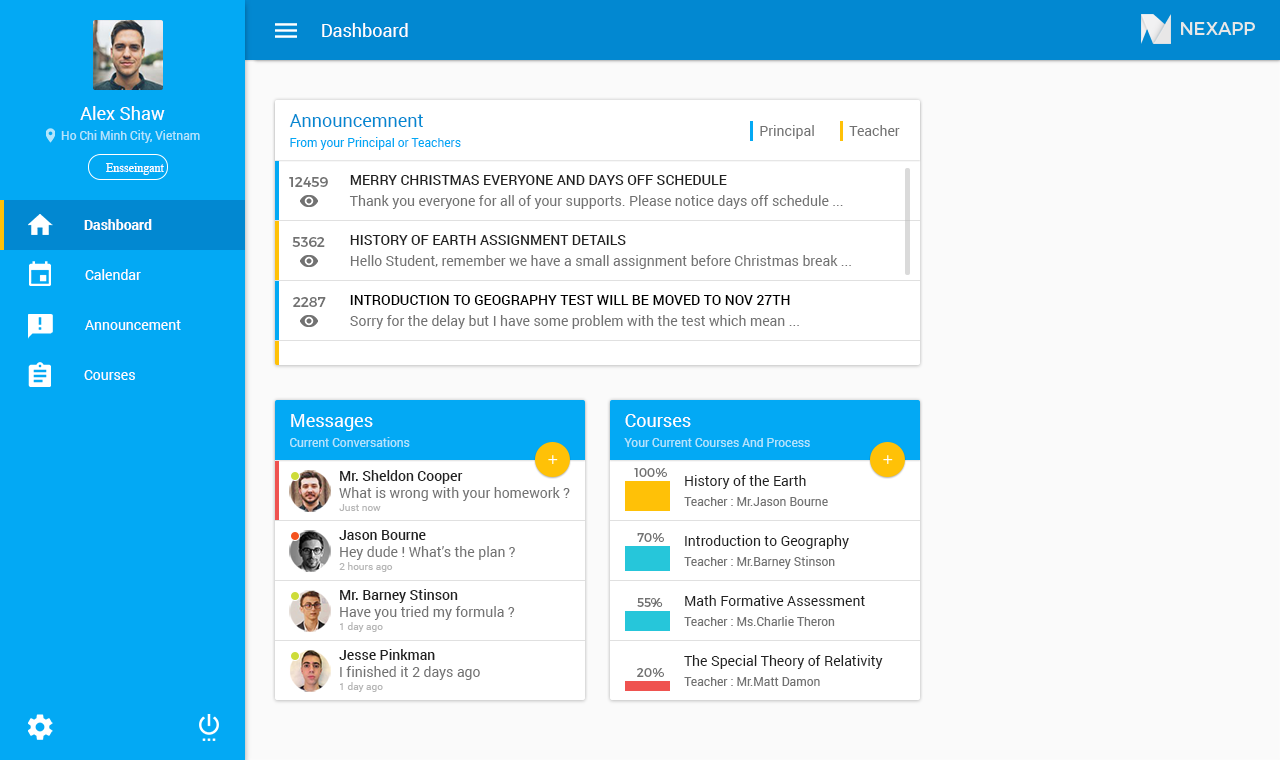
<style>
.page{position:relative;width:1280px;height:760px;background:#fafafa}
.page>*{position:absolute;margin:0}
.t1{font:18px "Roboto-Regular";color:#ffffff}
.t2{font:18px "Roboto-Regular";color:#fffefe}
.t3{font:18px "Roboto-Regular";color:#0288d1}
.t4{font:14px "Roboto-Regular";color:#727272}
.t5{font:12px "Roboto-Regular";color:#b3e5fc}
.t6{font:12px "Roboto-Regular";color:#03a9f4}
.t7{font:12px "MyriadPro-Regular";color:#fffefe}
.t8{font:14px "Montserrat-Regular";color:#727272}
.t9{font:14px/21px "Roboto-Regular";color:#727272}
.t10{font:14px/21px "Roboto-Medium";color:#212121}
.t11{font:14px "Roboto-Bold";color:#fffefe}
.t12{font:14px "Roboto-Regular";color:#fffefe}
.t13{font:14px/21px "Roboto-Medium";color:#000000;text-transform:uppercase}
.t14{font:14px "Roboto-Medium";color:#212121}
.t15{font:12px "Montserrat-Regular";color:#727272}
.t16{font:14px "Roboto-Regular";color:#212121}
.t17{font:12px "Roboto-Regular";color:#727272}
.t18{font:10px "Roboto-Regular";color:#b6b6b6}
</style>
<div class="page">
<p class="t1" style="left:322px;top:23px;width:86px;height:14px">Dashboard</p>
<p class="t2" style="left:80px;top:106px;width:85px;height:14px">Alex Shaw</p>
<p class="t3" style="left:289px;top:114px;width:134px;height:13px">Announcemnent</p>
<p class="t4" style="left:760px;top:125px;width:54px;height:14px">Principal</p>
<p class="t4" style="left:849px;top:125px;width:51px;height:11px">Teacher</p>
<p class="t5" style="left:61px;top:130px;width:139px;height:13px">Ho Chi Minh City, Vietnam</p>
<p class="t6" style="left:290px;top:137px;width:171px;height:13px">From your Principal or Teachers</p>
<p class="t7" style="left:106px;top:163px;width:58px;height:12px">Ensseingant</p>
<p class="t8" style="left:289px;top:177px;width:39px;height:10px">12459</p>
<p class="t9" style="left:349px;top:175px;width:494px;height:34px"><span class="t10">MERRY CHRISTMAS EVERYONE AND DAYS OFF SCHEDULE<br></span>Thank you everyone for all of your supports. Please notice days off schedule ...</p>
<p class="t11" style="left:84px;top:219px;width:68px;height:11px">Dashboard</p>
<p class="t8" style="left:292px;top:237px;width:33px;height:10px">5362</p>
<p class="t9" style="left:350px;top:235px;width:501px;height:34px"><span class="t10">HISTORY OF EARTH ASSIGNMENT DETAILS<br></span>Hello Student, remember we have a small assignment before Christmas break ...</p>
<p class="t12" style="left:85px;top:269px;width:56px;height:11px">Calendar</p>
<p class="t8" style="left:293px;top:297px;width:33px;height:10px">2287</p>
<p class="t9" style="left:350px;top:295px;width:449px;height:34px;text-align:justify"><span class="t13">Introduction to Geography Test WILL BE MOVED TO NOV 27TH <br></span>Sorry for the delay but I have some problem with the test which mean ...</p>
<p class="t12" style="left:85px;top:320px;width:96px;height:10px">Announcement</p>
<p class="t12" style="left:84px;top:370px;width:51px;height:10px">Courses</p>
<p class="t1" style="left:291px;top:414px;width:82px;height:17px">Messages</p>
<p class="t1" style="left:625px;top:414px;width:66px;height:13px">Courses</p>
<p class="t5" style="left:290px;top:437px;width:120px;height:10px">Current Conversations</p>
<p class="t5" style="left:624px;top:438px;width:186px;height:9px">Your Current Courses And Process</p>
<p class="t4" style="left:339px;top:470px;width:231px;height:31px"><span class="t14">Mr. Sheldon Cooper<br></span>What is wrong with your homework ?</p>
<p class="t15" style="left:634px;top:468px;width:33px;height:9px">100%</p>
<p class="t16" style="left:685px;top:475px;width:121px;height:14px">History of the Earth</p>
<p class="t17" style="left:684px;top:497px;width:144px;height:9px">Teacher : Mr.Jason Bourne</p>
<p class="t18" style="left:339px;top:504px;width:42px;height:7px">Just now</p>
<p class="t4" style="left:339px;top:530px;width:176px;height:30px"><span class="t14">Jason Bourne<br></span>Hey dude ! What’s the plan ?</p>
<p class="t15" style="left:637px;top:533px;width:27px;height:9px">70%</p>
<p class="t16" style="left:685px;top:535px;width:164px;height:14px">Introduction to Geography</p>
<p class="t17" style="left:684px;top:556px;width:151px;height:13px">Teacher : Mr.Barney Stinson</p>
<p class="t18" style="left:339px;top:562px;width:54px;height:10px">2 hours ago</p>
<p class="t4" style="left:340px;top:589px;width:175px;height:31px"><span class="t14">Mr. Barney Stinson<br></span>Have you tried my formula ?</p>
<p class="t15" style="left:637px;top:598px;width:26px;height:9px">55%</p>
<p class="t16" style="left:685px;top:595px;width:180px;height:11px">Math Formative Assessment</p>
<p class="t17" style="left:684px;top:616px;width:151px;height:10px">Teacher : Ms.Charlie Theron</p>
<p class="t18" style="left:340px;top:622px;width:43px;height:10px">1 day ago</p>
<p class="t4" style="left:339px;top:649px;width:141px;height:31px"><span class="t14">Jesse Pinkman<br></span>I finished it 2 days ago</p>
<p class="t16" style="left:684px;top:655px;width:199px;height:14px">The Special Theory of Relativity</p>
<p class="t15" style="left:637px;top:668px;width:27px;height:9px">20%</p>
<p class="t17" style="left:684px;top:677px;width:136px;height:9px">Teacher : Mr.Matt Damon</p>
<p class="t18" style="left:340px;top:682px;width:43px;height:10px">1 day ago</p>
</div>
